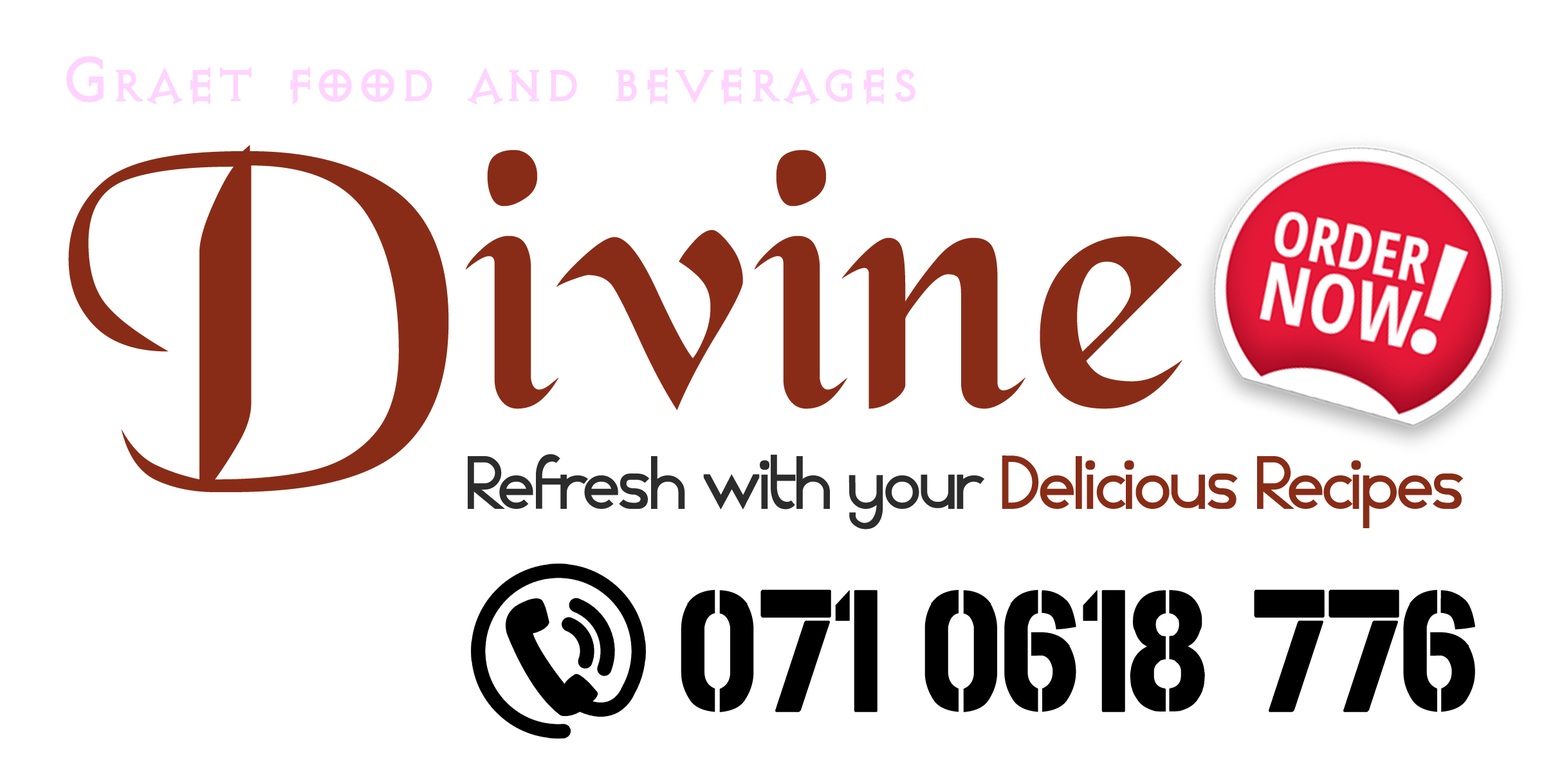
<style>
.page{position:relative;width:1544px;height:772px;background:#ffffff}
.page>*{position:absolute;margin:0}
.t1{font:72.4px "AvQest";color:#ffd3ff}
.t2{font:394.1px "BlackChancery";color:#892c17}
.t3{font:101.9px "Azrael";color:#2c2c2c}
.t4{font:101.9px "Azrael";color:#892c17}
.t5{font:173.7px "CaptureSmallzClean";color:#000000;scale:0.83 1}
</style>
<div class="page">
<p class="t1" style="left:66px;top:56px;width:850px;height:50px">Graet food and beverages</p>
<p class="t2" style="left:68px;top:145px;width:1115px;height:347px">Divine</p>
<p class="t3" style="left:468px;top:454px;width:995px;height:76px">Refresh with your <span class="t4">Delicious Recipes</span></p>
<p class="t5" style="left:681px;top:589px;width:794px;height:123px">071 0618 776</p>
</div>
